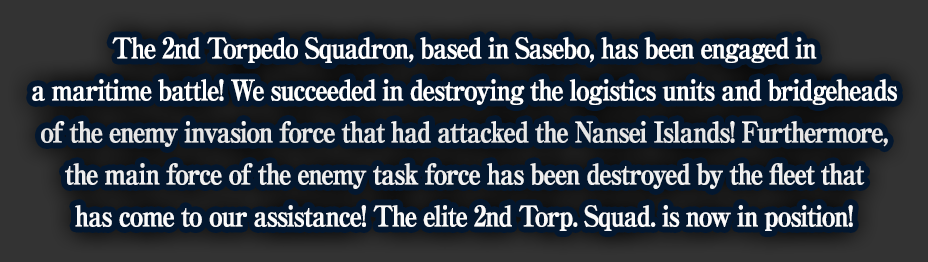
<style>
.page{position:relative;width:928px;height:262px;background:#03172f}
.page>*{position:absolute;margin:0}
.t1{font:28px/42px "RyuminPro-ExBold";letter-spacing:-0.08em;color:#ffffff;font-weight:bold;scale:0.9 1}
</style>
<div class="page">
<p class="t1" style="left:32px;top:37px;width:865px;height:194px;text-align:center">The 2nd Torpedo Squadron, based in Sasebo, has been engaged in<br>a maritime battle! We succeeded in destroying the logistics units and bridgeheads<br>of the enemy invasion force that had attacked the Nansei Islands! Furthermore,<br>the main force of the enemy task force has been destroyed by the fleet that<br>has come to our assistance! The elite 2nd Torp. Squad. is now in position!</p>
</div>
